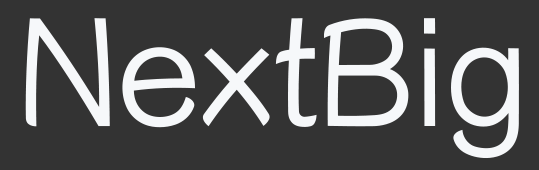
<style>
.page{position:relative;width:539px;height:170px;background:#333333}
.page>*{position:absolute;margin:0}
.t1{font:150.2px "YuppySC-Regular";color:#f6f8fa}
</style>
<div class="page">
<p class="t1" style="left:25px;top:18px;width:494px;height:141px">NextBig</p>
</div>
